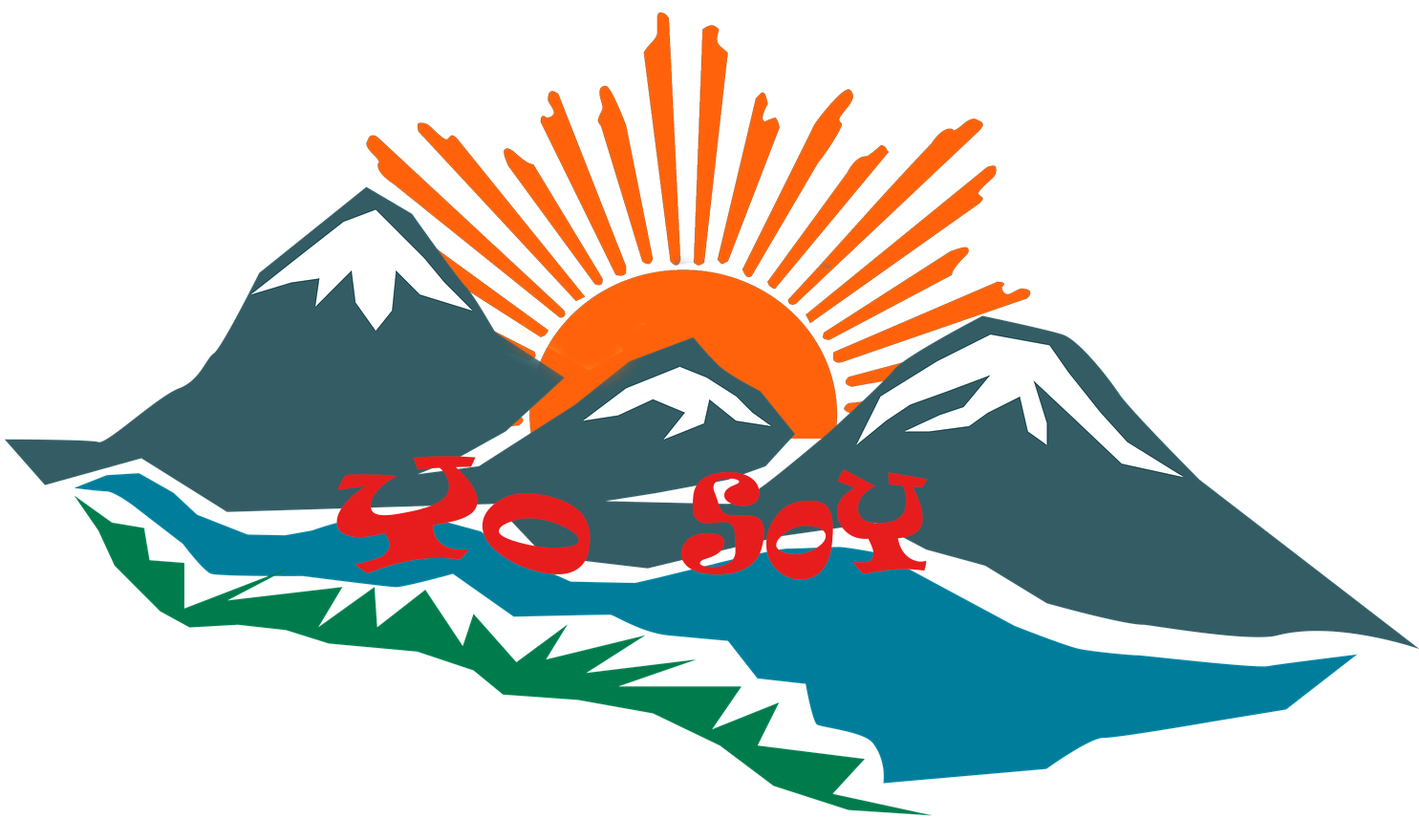
<style>
.page{position:relative;width:1419px;height:840px;background:#ffffff}
.page>*{position:absolute;margin:0}
.t1{font:149.4px "Ravie";color:#e71d1d;scale:0.89 1}
.t2{font:114.7px "Ravie";color:#e71d1d}
</style>
<div class="page">
<p class="t1" style="left:336px;top:456px;width:255px;height:118px">Yo</p>
<p class="t2" style="left:681px;top:469px;width:247px;height:111px">SoY</p>
</div>
